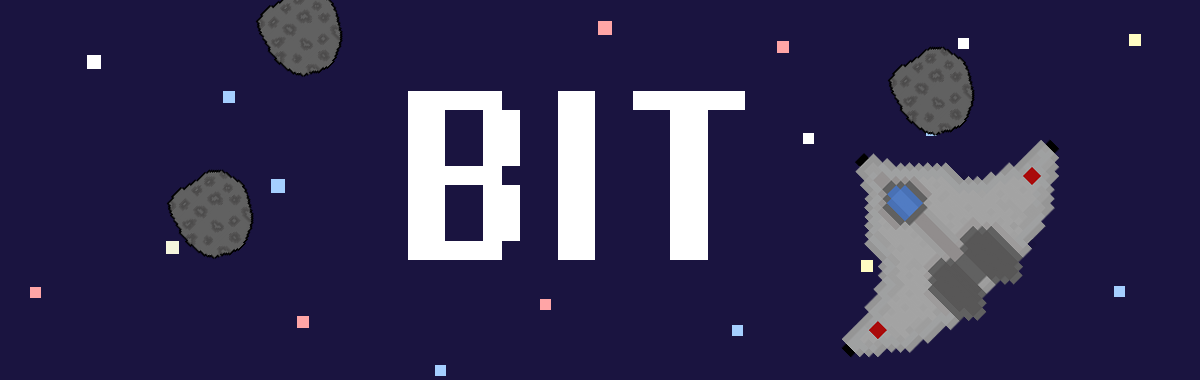
<style>
.page{position:relative;width:1200px;height:380px;background:#1a1440}
.page>*{position:absolute;margin:0}
.t1{font:300px "PixelOperator-Bold";color:#ffffff}
</style>
<div class="page">
<p class="t1" style="left:408px;top:91px;width:337px;height:169px">BIT</p>
</div>
